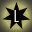
<style>
.page{position:relative;width:32px;height:32px}
.page>*{position:absolute;margin:0}
.t1{font:15.7px "AgencyFB-Reg";letter-spacing:0.05em;color:#ffffff}
</style>
<div class="page">
<p class="t1" style="left:14px;top:10px;width:5px;height:12px">L</p>
</div>
